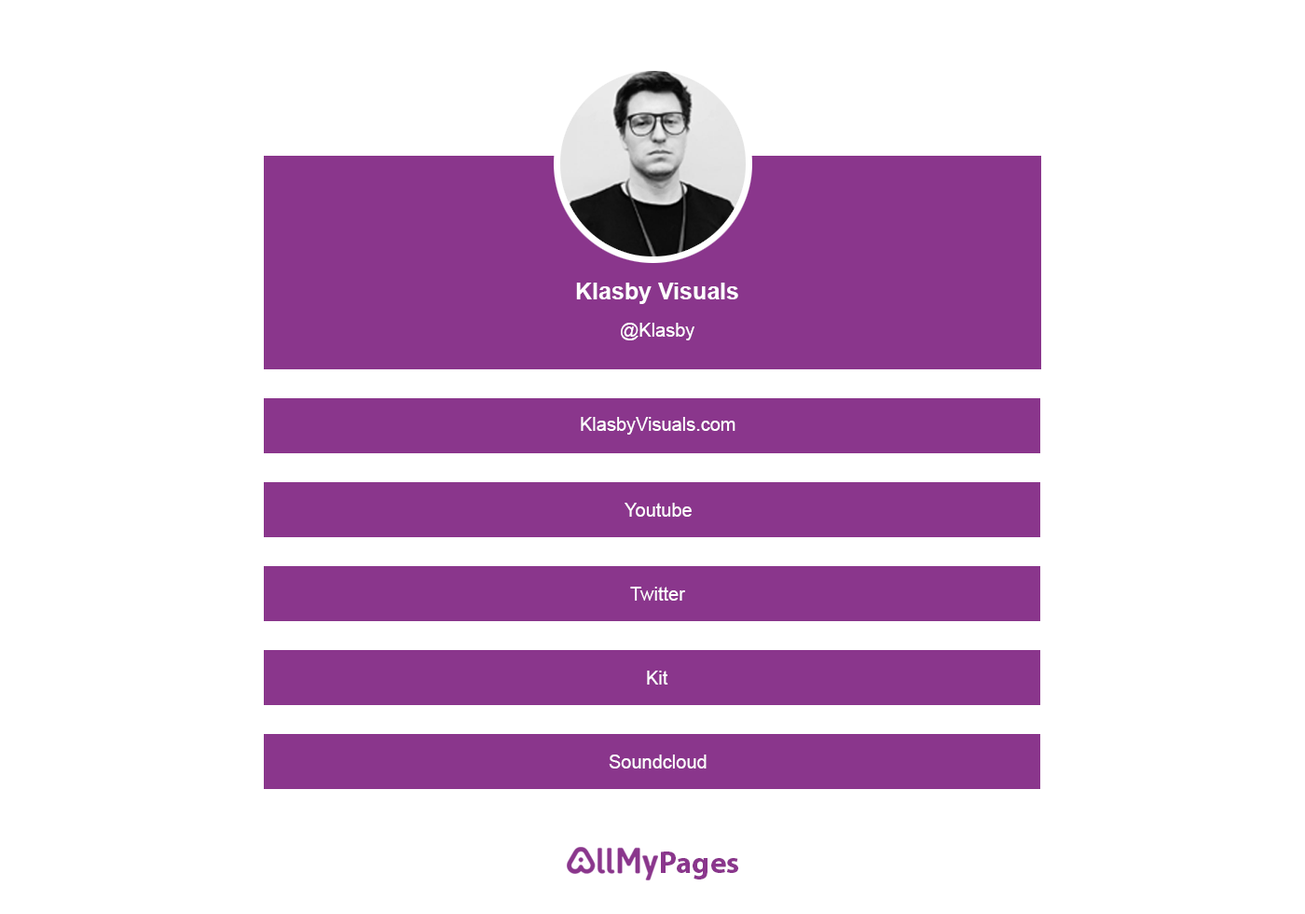
<style>
.page{position:relative;width:1305px;height:914px;background:#ffffff}
.page>*{position:absolute;margin:0}
.t1{font:23.3px "Arial-BoldMT";color:#ffffff}
.t2{font:18.6px "ArialMT";color:#ffffff}
.t3{font:30.9px "MyriadPro-Bold";color:#8a368c}
</style>
<div class="page">
<p class="t1" style="left:576px;top:282px;width:162px;height:22px">Klasby Visuals</p>
<p class="t2" style="left:621px;top:323px;width:74px;height:17px">@Klasby</p>
<p class="t2" style="left:581px;top:417px;width:155px;height:17px">KlasbyVisuals.com</p>
<p class="t2" style="left:625px;top:502px;width:67px;height:14px">Youtube</p>
<p class="t2" style="left:630px;top:586px;width:55px;height:14px">Twitter</p>
<p class="t2" style="left:647px;top:670px;width:21px;height:14px">Kit</p>
<p class="t2" style="left:609px;top:754px;width:98px;height:14px">Soundcloud</p>
<p class="t3" style="left:661px;top:851px;width:77px;height:28px">Pages</p>
</div>
